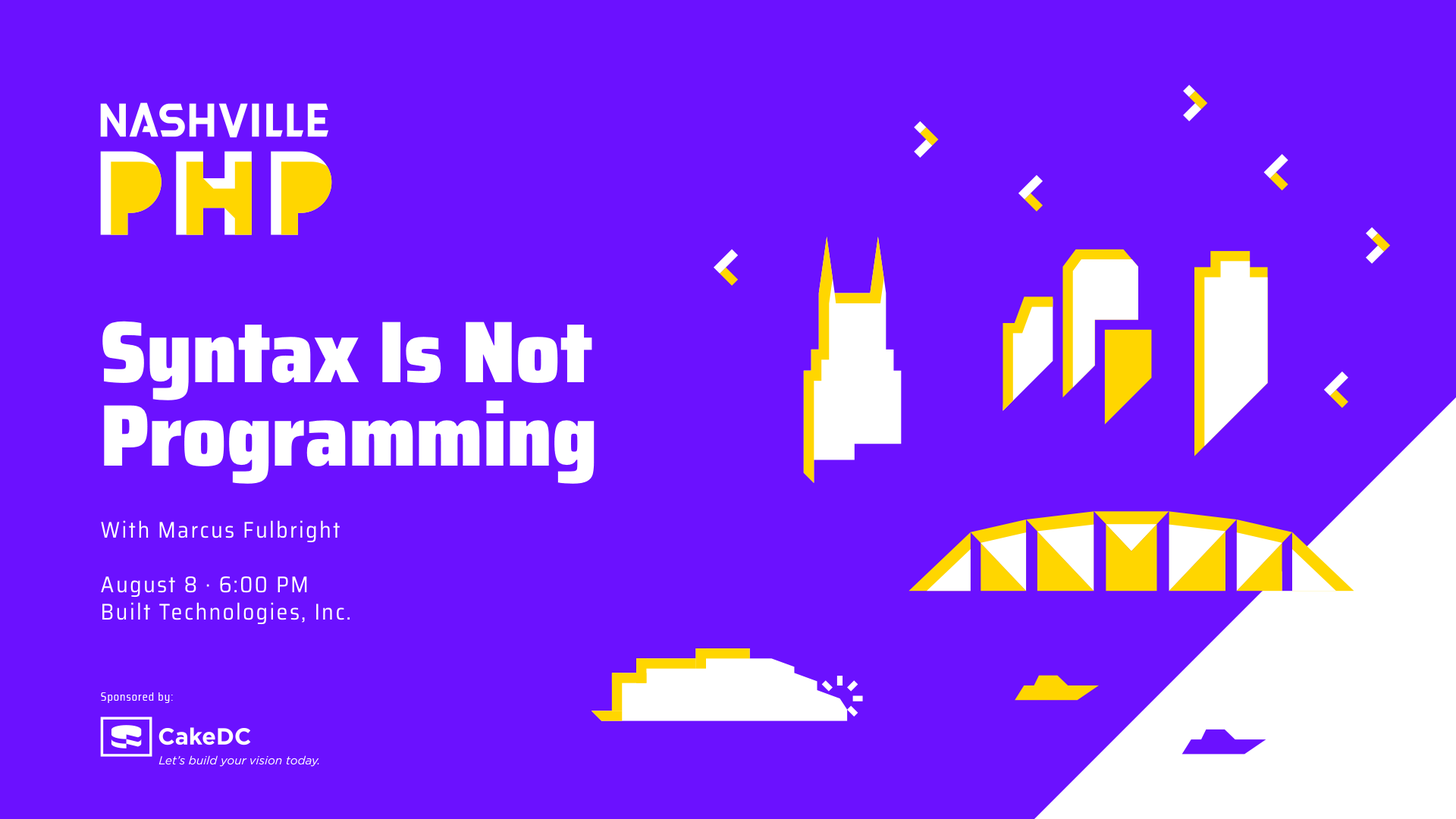
<style>
.page{position:relative;width:1456px;height:819px;background:#6b11ff}
.page>*{position:absolute;margin:0}
.t1{font:87.4px/83.4px "SairaSemiCondensed-Black";color:#ffffff}
.t2{font:22.7px "SairaSemiCondensed-Regular";letter-spacing:0.075em;color:#ffffff}
</style>
<div class="page">
<p class="t1" style="left:102px;top:321px;width:493px;height:163px">Syntax Is Not <br>Programming</p>
<p class="t2" style="left:101px;top:520px;width:249px;height:105px">With Marcus Fulbright<br><br>August 8 · 6:00 PM<br>Built Technologies, Inc.</p>
</div>
